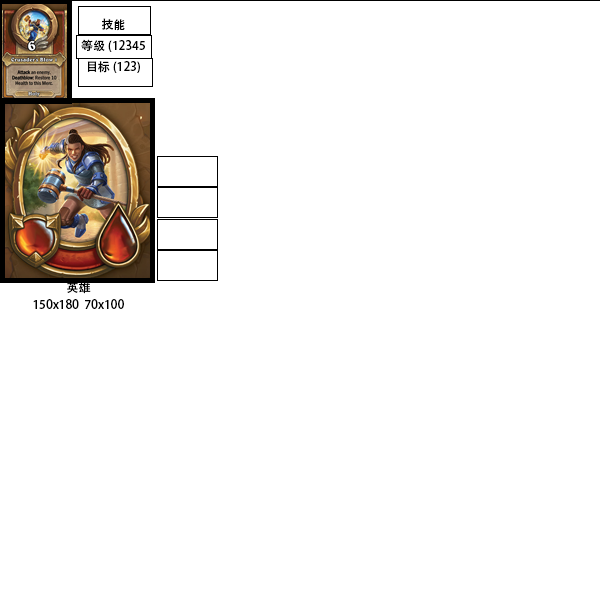
<style>
.page{position:relative;width:600px;height:600px;background:#ffffff}
.page>*{position:absolute;margin:0}
.t1{font:12px "AdobeHeitiStd-Regular";color:#000000}
</style>
<div class="page">
<p class="t1" style="left:81px;top:18px;width:64px;height:55px;text-align:center">技能<br>等级(12345<br>目标(123)</p>
<p class="t1" style="left:67px;top:281px;width:24px;height:13px">英雄</p>
<p class="t1" style="left:33px;top:299px;width:91px;height:10px">150x180  70x100</p>
</div>
